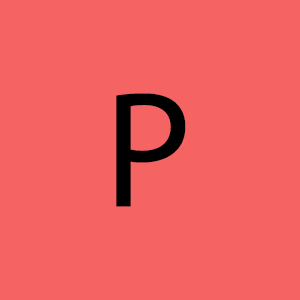
<style>
.page{position:relative;width:300px;height:300px;background:#f56363}
.page>*{position:absolute;margin:0}
.t1{font:166.7px "MyriadPro-Regular";color:#000000}
</style>
<div class="page">
<p class="t1" style="left:116px;top:93px;width:70px;height:114px">P</p>
</div>
